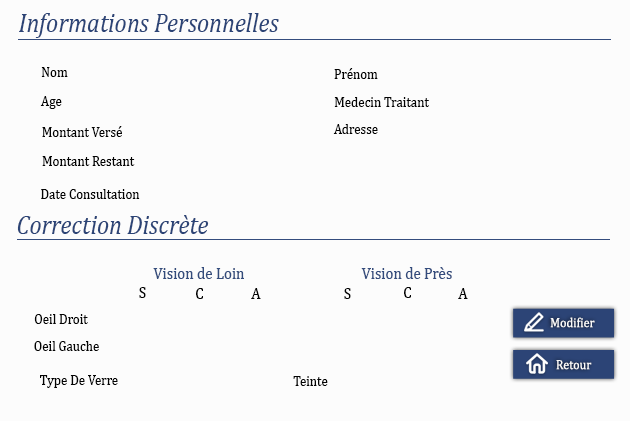
<style>
.page{position:relative;width:630px;height:421px;background:#fcfcfc}
.page>*{position:absolute;margin:0}
.t1{font:27.4px "Cambria-Italic";color:#2c4476;scale:0.88 1}
.t2{font:14.8px "Cambria";color:#000000;scale:0.88 1}
.t3{font:14.8px "Cambria";color:#030303;scale:0.88 1}
.t4{font:17.1px "Cambria";color:#334c7c;scale:0.88 1}
.t5{font:17.1px "Cambria";color:#344c7d;scale:0.88 1}
.t6{font:17.1px "Cambria";color:#030303;scale:0.88 1}
.t7{font:13.4px "Cambria";color:#fafafa;scale:0.9 1}
</style>
<div class="page">
<p class="t1" style="left:19px;top:13px;width:260px;height:25px">Informations Personnelles</p>
<p class="t2" style="left:41px;top:67px;width:27px;height:10px">Nom</p>
<p class="t3" style="left:334px;top:68px;width:44px;height:11px">Prénom</p>
<p class="t3" style="left:40px;top:96px;width:22px;height:13px">Age</p>
<p class="t3" style="left:334px;top:97px;width:95px;height:10px">Medecin Traitant</p>
<p class="t3" style="left:42px;top:126px;width:80px;height:11px">Montant Versé</p>
<p class="t3" style="left:333px;top:124px;width:45px;height:10px">Adresse</p>
<p class="t3" style="left:42px;top:156px;width:93px;height:10px">Montant Restant</p>
<p class="t3" style="left:41px;top:189px;width:99px;height:10px">Date Consultation</p>
<p class="t1" style="left:17px;top:215px;width:192px;height:19px">Correction Discrète</p>
<p class="t4" style="left:153px;top:267px;width:91px;height:12px">Vision de Loin</p>
<p class="t5" style="left:361px;top:267px;width:91px;height:12px">Vision de Près</p>
<p class="t6" style="left:139px;top:287px;width:7px;height:11px">S</p>
<p class="t6" style="left:196px;top:288px;width:7px;height:11px">C</p>
<p class="t6" style="left:251px;top:288px;width:10px;height:11px">A</p>
<p class="t6" style="left:344px;top:288px;width:7px;height:11px">S</p>
<p class="t6" style="left:404px;top:287px;width:7px;height:11px">C</p>
<p class="t6" style="left:458px;top:288px;width:10px;height:11px">A</p>
<p class="t3" style="left:34px;top:314px;width:54px;height:10px">Oeil Droit</p>
<p class="t7" style="left:550px;top:317px;width:45px;height:11px">Modifier</p>
<p class="t3" style="left:34px;top:341px;width:65px;height:10px">Oeil Gauche</p>
<p class="t7" style="left:556px;top:360px;width:36px;height:10px">Retour</p>
<p class="t3" style="left:40px;top:375px;width:78px;height:13px">Type De Verre</p>
<p class="t3" style="left:293px;top:376px;width:35px;height:10px">Teinte</p>
</div>
